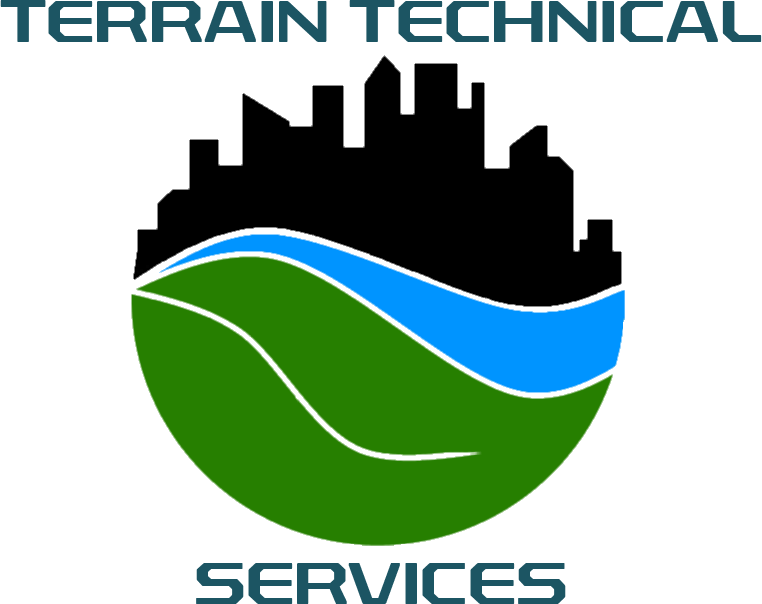
<style>
.page{position:relative;width:762px;height:604px;background:#ffffff}
.page>*{position:absolute;margin:0}
.t1{font:60px "RexliaRg-Regular";color:#1c5563}
</style>
<div class="page">
<p class="t1" style="left:0px;top:0px;width:762px;height:42px">TERRAIN TECHNICAL</p>
<p class="t1" style="left:196px;top:563px;width:370px;height:41px">SERVICES</p>
</div>
